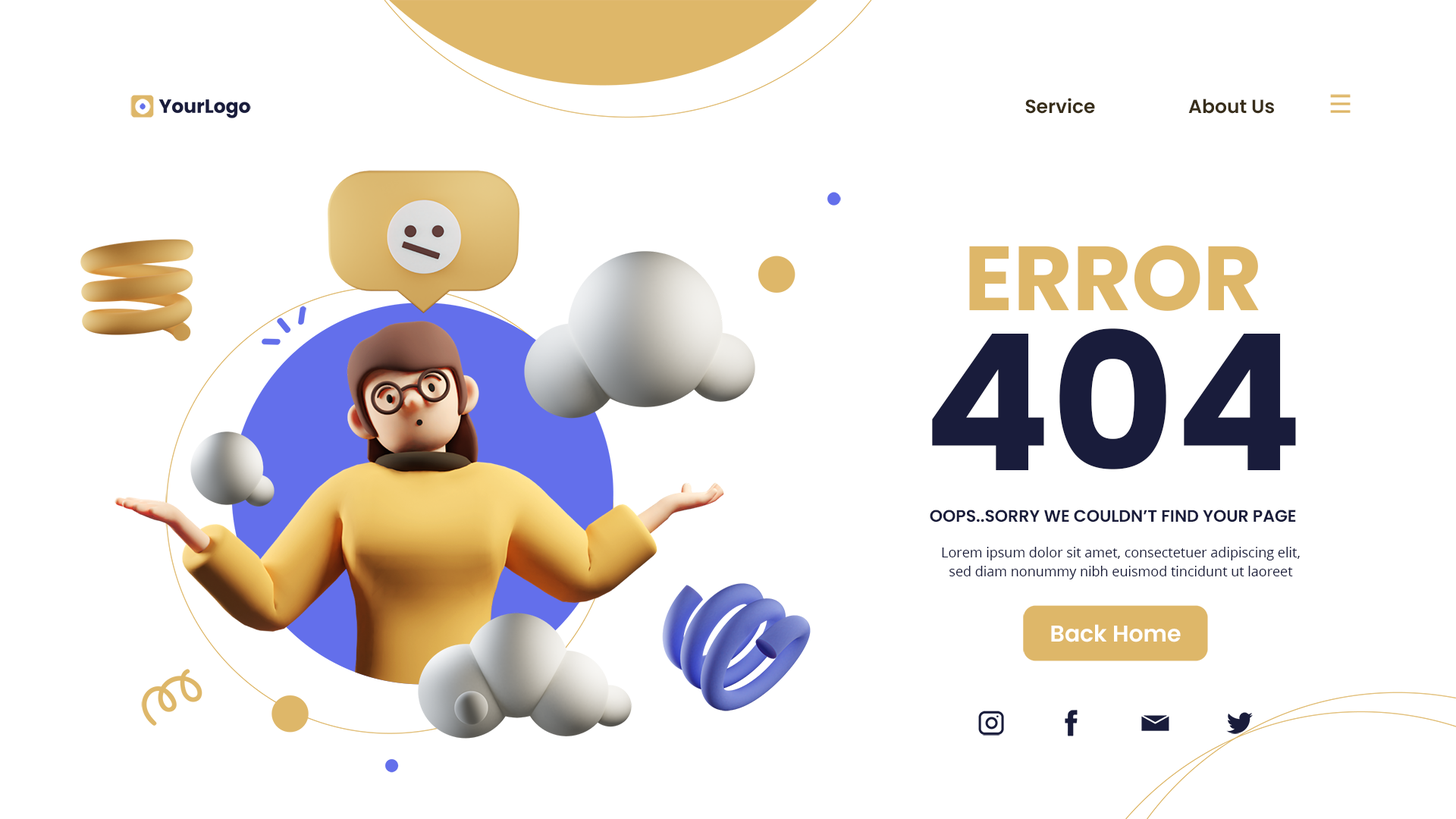
<style>
.page{position:relative;width:1456px;height:819px;background:#ffffff}
.page>*{position:absolute;margin:0}
.t1{font:19px "Poppins-SemiBold";color:#382e1a}
.t2{font:91px "Poppins-Bold";color:#deb769}
.t3{font:189.6px "Poppins-Bold";color:#191c3b}
.t4{font:16.7px "Poppins-SemiBold";color:#191c3b}
.t5{font:13.6px/19px "OpenSans-Regular";color:#191c3b}
.t6{font:22.7px "Poppins-SemiBold";color:#ffffff}
</style>
<div class="page">
<p class="t1" style="left:1025px;top:98px;width:70px;height:16px">Service</p>
<p class="t1" style="left:1188px;top:99px;width:86px;height:15px">About Us</p>
<p class="t2" style="left:969px;top:245px;width:290px;height:66px">ERROR</p>
<p class="t3" style="left:932px;top:328px;width:364px;height:142px">404</p>
<p class="t4" style="left:930px;top:510px;width:366px;height:12px">OOPS..SORRY WE COULDN’T FIND YOUR PAGE</p>
<p class="t5" style="left:942px;top:547px;width:358px;height:32px;text-align:center">Lorem ipsum dolor sit amet, consectetuer adipiscing elit, sed diam nonummy nibh euismod tincidunt ut laoreet</p>
<p class="t6" style="left:1051px;top:624px;width:130px;height:18px">Back Home</p>
</div>
